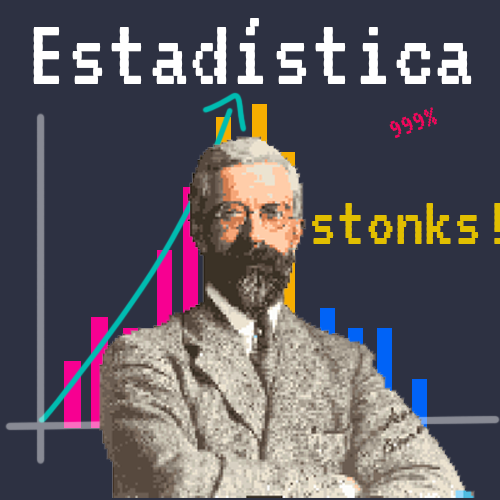
<style>
.page{position:relative;width:500px;height:500px;background:#2d3142}
.page>*{position:absolute;margin:0}
.t1{font:102px "VT323-Regular";color:#ffffff}
.t2{font:30.2px "VT323-Regular";color:#f7005d}
.t3{font:72.9px "VT323-Regular";color:#e1bf00}
</style>
<div class="page">
<p class="t1" style="left:33px;top:18px;width:439px;height:66px">Estadística</p>
<p class="t2" style="left:389px;top:107px;width:48px;height:31px;rotate:-19deg">999%</p>
<p class="t3" style="left:312px;top:203px;width:189px;height:41px">stonks!</p>
</div>
